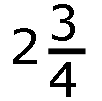
<style>
.page{position:relative;width:102px;height:101px;background:#ffffff}
.page>*{position:absolute;margin:0}
.t1{font:48px "Verdana";color:#000000}
</style>
<div class="page">
<p class="t1" style="left:50px;top:4px;width:26px;height:93px">3<br>4</p>
<p class="t1" style="left:13px;top:28px;width:24px;height:36px">2</p>
</div>
